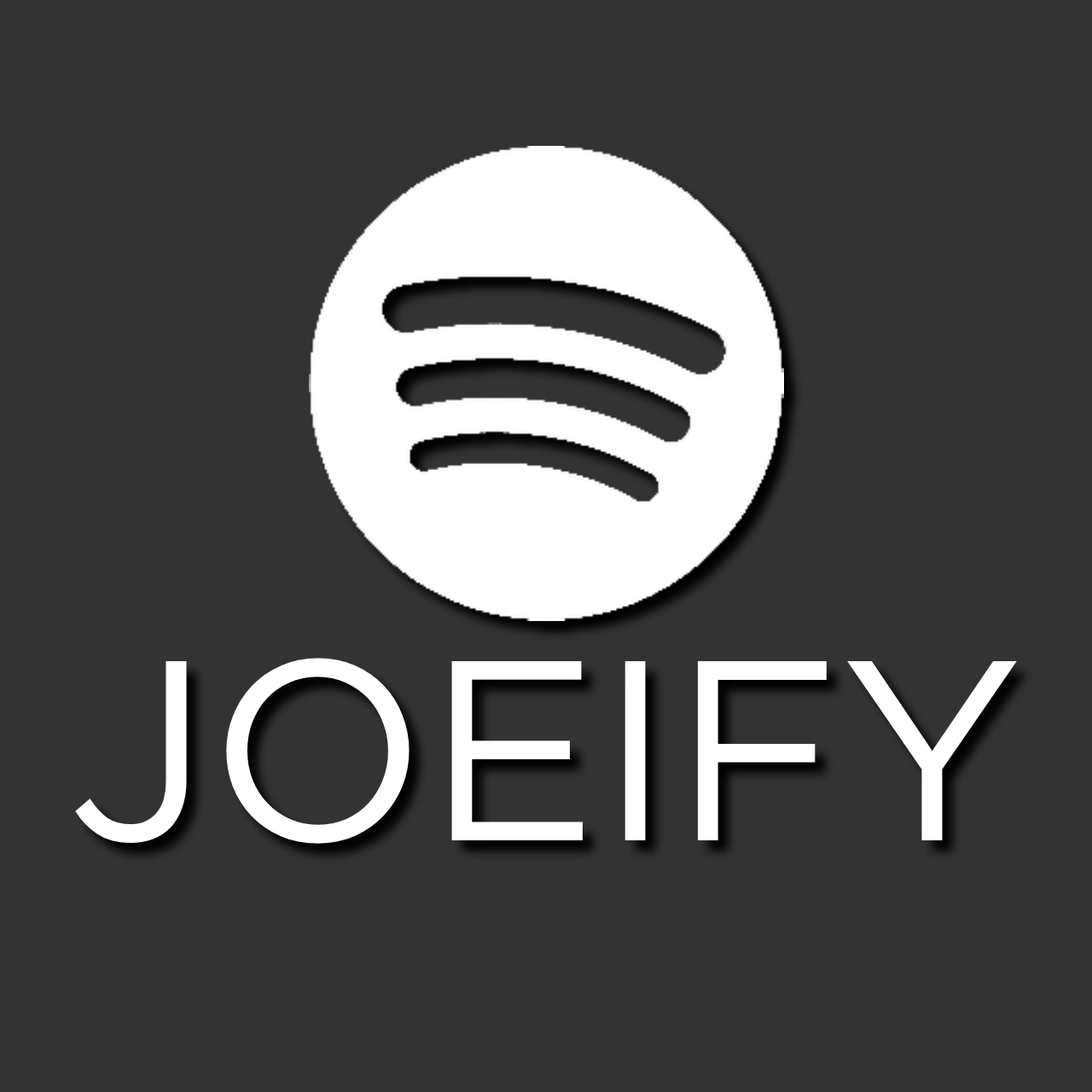
<style>
.page{position:relative;width:1092px;height:1092px;background:#333333}
.page>*{position:absolute;margin:0}
.t1{font:255.9px "Gotham-Book";color:#ffffff}
</style>
<div class="page">
<p class="t1" style="left:75px;top:658px;width:942px;height:186px">JOEIFY</p>
</div>
